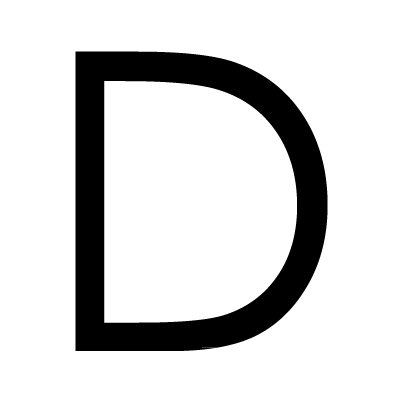
<style>
.page{position:relative;width:400px;height:400px;background:#ffffff}
.page>*{position:absolute;margin:0}
.t1{font:416.7px "CenturyGothic";color:#000000}
</style>
<div class="page">
<p class="t1" style="left:75px;top:51px;width:253px;height:300px">D</p>
</div>
